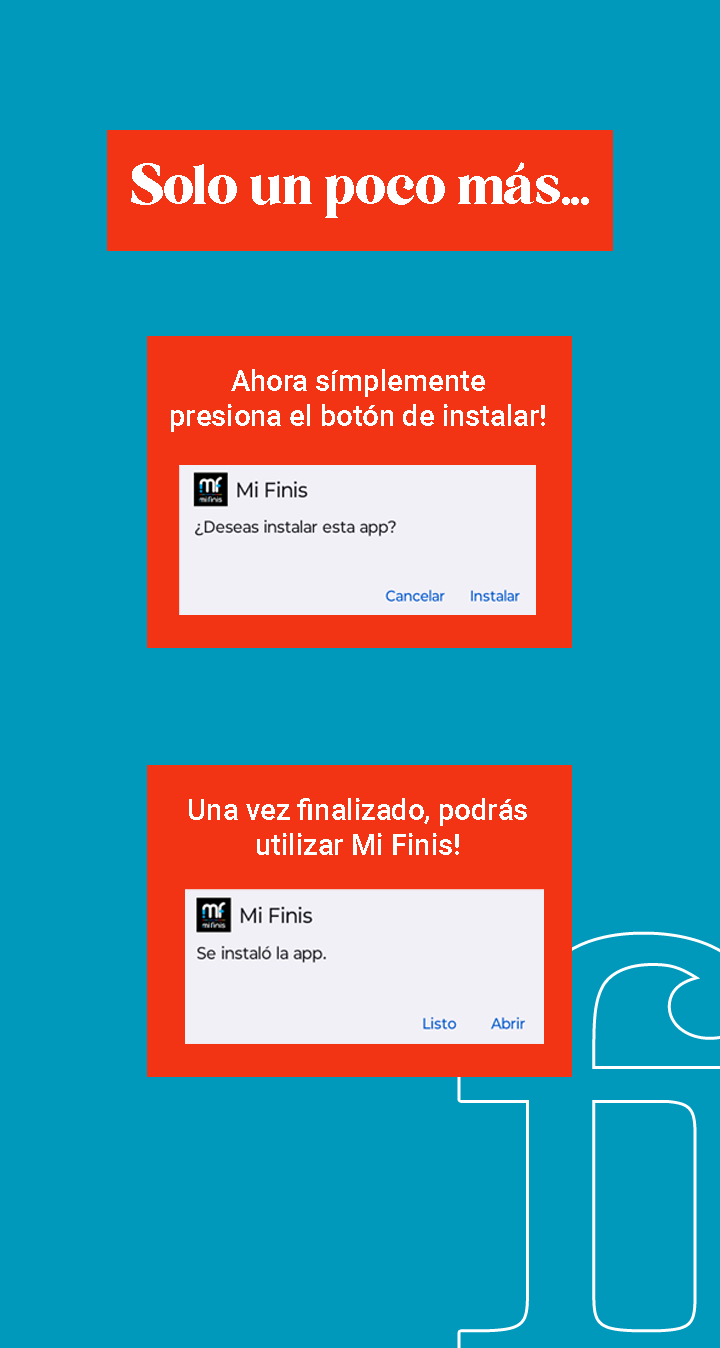
<style>
.page{position:relative;width:720px;height:1348px;background:#0099bb}
.page>*{position:absolute;margin:0}
.t1{font:54.6px "5thAvenue";color:#ffffff}
.t2{font:29.1px "Roboto-Medium";color:#ffffff}
</style>
<div class="page">
<p class="t1" style="left:131px;top:162px;width:458px;height:56px">Solo un poco más...</p>
<p class="t2" style="left:171px;top:369px;width:374px;height:63px;text-align:center">Ahora símplemente<br>presiona el botón de instalar!</p>
<p class="t2" style="left:189px;top:798px;width:338px;height:57px;text-align:center">Una vez finalizado, podrás<br>utilizar Mi Finis!</p>
</div>
